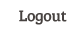
<style>
.page{position:relative;width:82px;height:35px;background:#ffffff}
.page>*{position:absolute;margin:0}
.t1{font:16px "BreeSerif-Regular";letter-spacing:-0.025em;color:#474240}
</style>
<div class="page">
<p class="t1" style="left:19px;top:10px;width:48px;height:15px">Logout</p>
</div>
